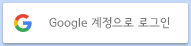
<style>
.page{position:relative;width:191px;height:46px;background:#ffffff}
.page>*{position:absolute;margin:0}
.t1{font:12px "SeoulNamsanB";color:#757575}
</style>
<div class="page">
<p class="t1" style="left:49px;top:17px;width:120px;height:12px">Google 계정으로 로그인</p>
</div>
